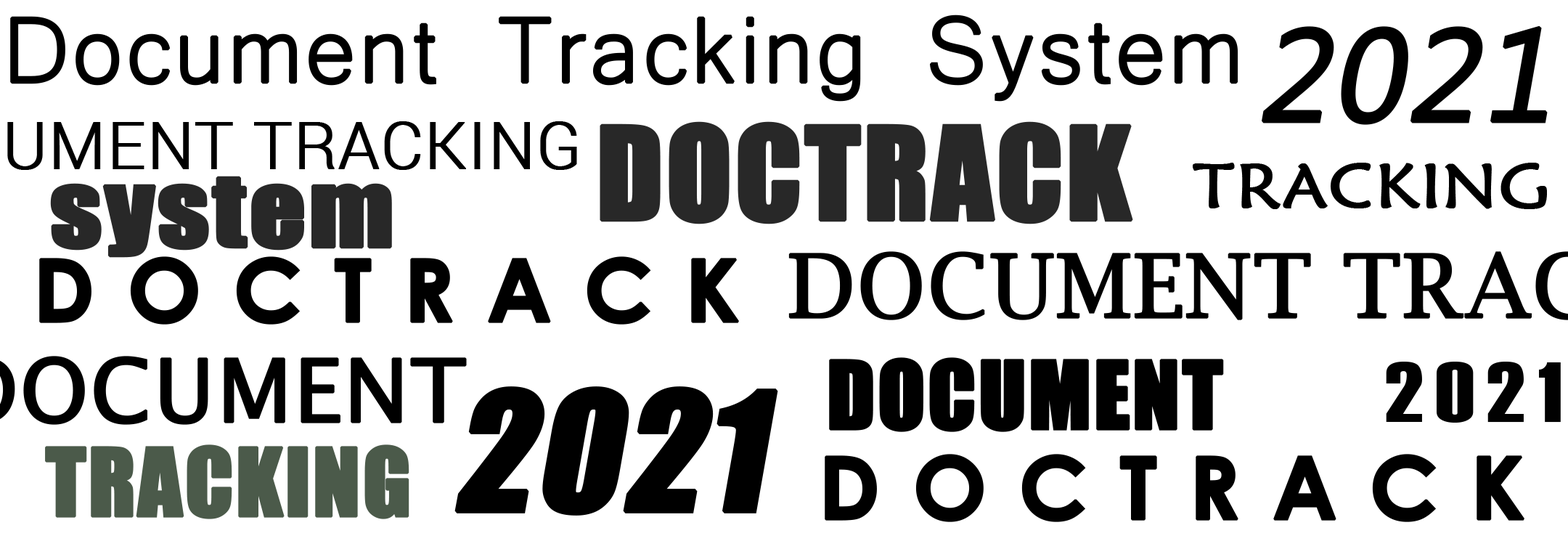
<style>
.page{position:relative;width:1568px;height:549px;background:#ffffff}
.page>*{position:absolute;margin:0}
.t1{font:119.8px "Microsoft-Yi-Baiti";letter-spacing:0.003em;color:#000000;font-weight:bold}
.t2{font:130.7px "MyanmarText";letter-spacing:0.003em;color:#000000;font-weight:bold;font-style:italic}
.t3{font:119.8px "Impact";letter-spacing:0.003em;color:#282828;font-weight:bold}
.t4{font:62.8px "MaiandraGD-Regular";letter-spacing:0.003em;color:#000000;font-weight:bold;scale:1.08 1}
.t5{font:93.4px "Impact";letter-spacing:0.003em;color:#282828;font-weight:bold;scale:1.18 1}
.t6{font:87.1px "CenturyGothic-Bold";letter-spacing:0.35em;color:#000000;font-weight:bold}
.t7{font:87.1px "Impact";letter-spacing:0.003em;color:#000000;font-weight:bold}
.t8{font:84.8px "Haettenschweiler";letter-spacing:0.12em;color:#010101;scale:1.2 1}
.t9{font:152.4px "Impact";letter-spacing:0.003em;color:#000000;font-weight:bold;font-style:italic}
.t10{font:87.1px "Impact";letter-spacing:0.003em;color:#4b5a4a;font-weight:bold}
</style>
<div class="page">
<p class="t1" style="left:10px;top:15px;width:1228px;height:87px">Document Tracking System</p>
<p class="t2" style="left:1262px;top:25px;width:286px;height:100px">2021</p>
<p class="t3" style="left:600px;top:121px;width:533px;height:103px">DOCTRACK</p>
<p class="t4" style="left:1193px;top:163px;width:354px;height:46px">TRACKING</p>
<p class="t5" style="left:50px;top:176px;width:342px;height:82px">system</p>
<p class="t6" style="left:39px;top:256px;width:700px;height:68px">DOCTRACK</p>
<p class="t7" style="left:829px;top:357px;width:395px;height:75px">DOCUMENT</p>
<p class="t8" style="left:1386px;top:362px;width:175px;height:60px">2021</p>
<p class="t9" style="left:454px;top:386px;width:324px;height:129px">2021</p>
<p class="t10" style="left:45px;top:444px;width:364px;height:75px">TRACKING</p>
<p class="t6" style="left:825px;top:454px;width:699px;height:68px">DOCTRACK</p>
</div>
